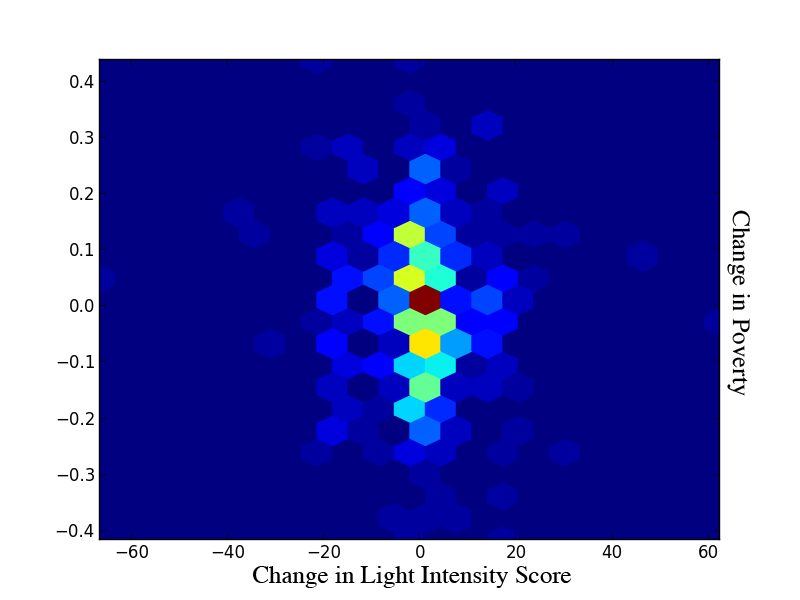
<style>
.page{position:relative;width:800px;height:600px;background:#000080}
.page>*{position:absolute;margin:0}
.t1{font:25px "Times-Roman";color:#000000}
</style>
<div class="page">
<p class="t1" style="left:727px;top:210px;width:23px;height:186px;rotate:90deg">Change in Poverty</p>
<p class="t1" style="left:253px;top:566px;width:318px;height:22px">Change in Light Intensity Score</p>
</div>
